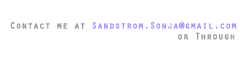
<style>
.page{position:relative;width:240px;height:60px;background:#ffffff}
.page>*{position:absolute;margin:0}
.t1{font:9px "Orator-Regular";font-weight:bold}
</style>
<div class="page">
<p class="t1" style="left:10px;top:22px;width:227px;height:18px">Contact me at Sandstrom.Sonja@gmail.com<br>        or Through</p>
</div>
